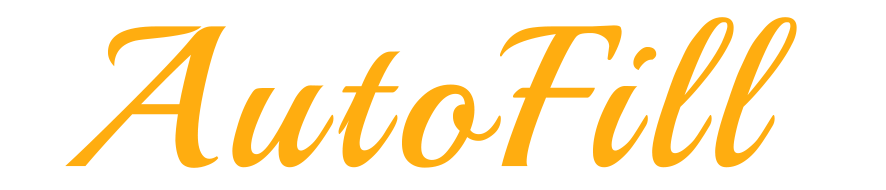
<style>
.page{position:relative;width:886px;height:190px;background:#ffffff}
.page>*{position:absolute;margin:0}
.t1{font:200px "Playball-Regular";letter-spacing:0.07em;color:#ffad10}
</style>
<div class="page">
<p class="t1" style="left:65px;top:17px;width:732px;height:151px">AutoFill</p>
</div>
